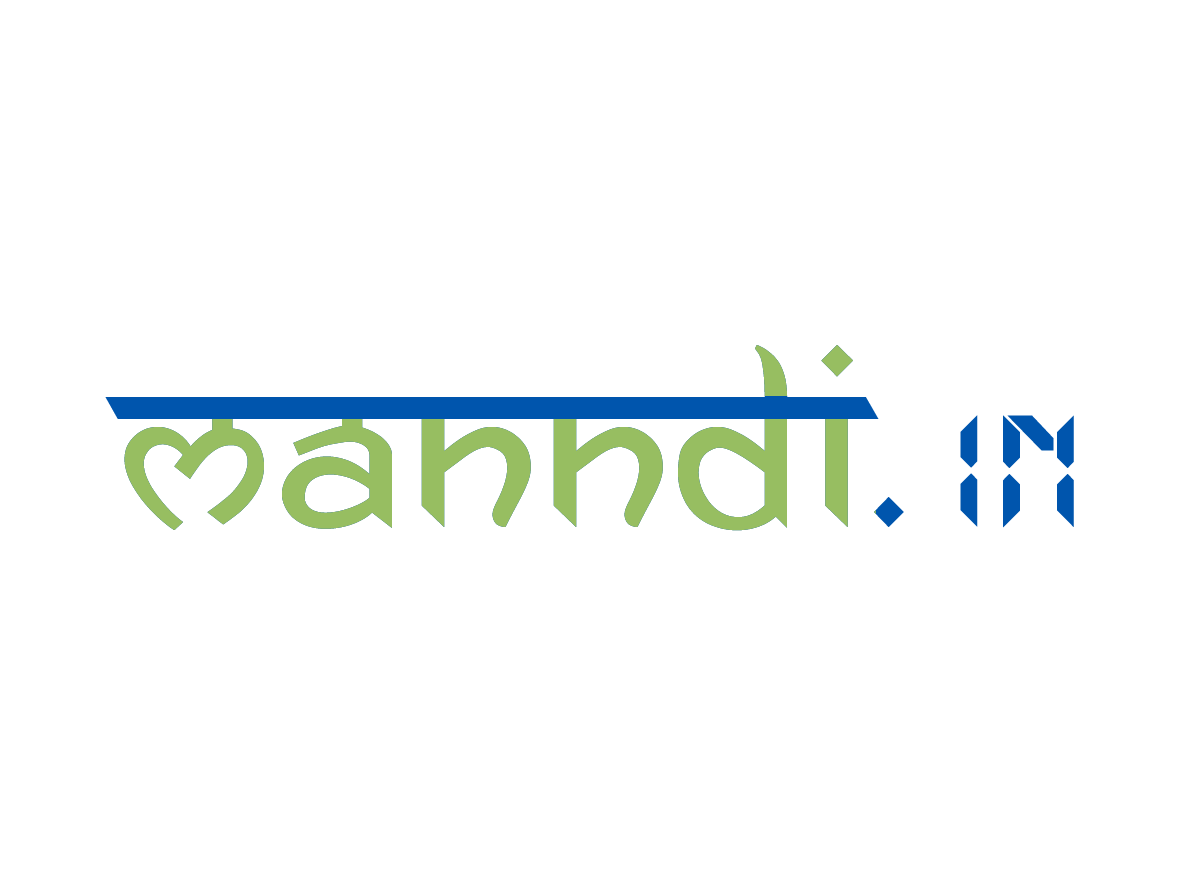
<style>
.page{position:relative;width:1180px;height:876px;background:#ffffff}
.page>*{position:absolute;margin:0}
.t1{font:247.2px "AnandaNamaste"}
.t2{font:247.2px "AnandaNamaste";letter-spacing:0.12em}
.t3{font:175.1px "LCD"}
</style>
<div class="page">
<p class="t1" style="left:105px;top:345px;width:969px;height:186px">manndi<span class="t2">.</span><span class="t3">IN</span></p>
<p class="t1" style="left:105px;top:345px;width:969px;height:186px">manndi<span class="t2">.</span><span class="t3">IN</span></p>
</div>
